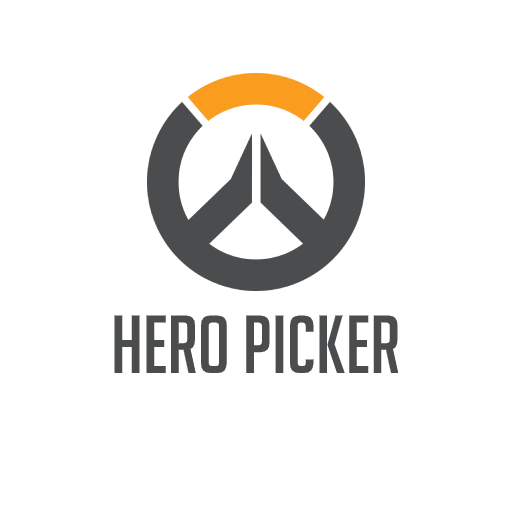
<style>
.page{position:relative;width:512px;height:512px;background:#ffffff}
.page>*{position:absolute;margin:0}
.t1{font:80px "BigNoodleTitling";color:#4a4c4e}
</style>
<div class="page">
<p class="t1" style="left:114px;top:315px;width:285px;height:58px">Hero Picker</p>
</div>
